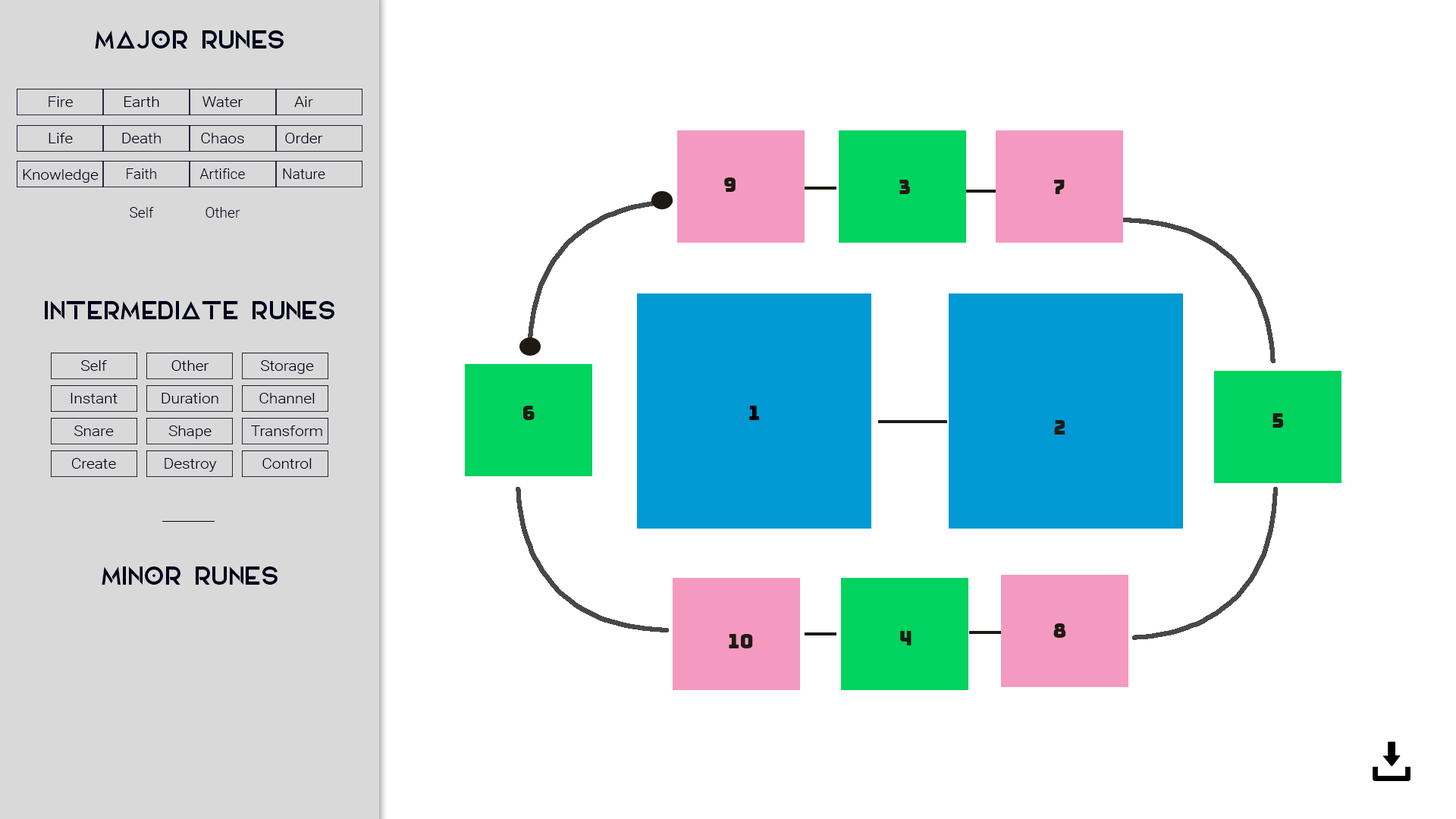
<style>
.page{position:relative;width:1456px;height:819px;background:#ffffff}
.page>*{position:absolute;margin:0}
.t1{font:25.3px "Elianto-Regular";color:#01001b}
.t2{font:14.5px "Roboto-Light";color:#01001b;scale:1.08 1}
.t3{font:14.5px "Roboto-Light";color:#01001b}
.t4{font:19px "Bungee-Regular";color:#1e1a13}
.t5{font:19px "Bungee-Regular";color:#000000}
</style>
<div class="page">
<p class="t1" style="left:95px;top:30px;width:189px;height:19px">MAJOR RUNES</p>
<p class="t2" style="left:49px;top:96px;width:24px;height:11px">Fire</p>
<p class="t2" style="left:124px;top:96px;width:35px;height:11px">Earth</p>
<p class="t2" style="left:202px;top:96px;width:41px;height:11px">Water</p>
<p class="t2" style="left:294px;top:96px;width:19px;height:11px">Air</p>
<p class="t2" style="left:49px;top:133px;width:24px;height:10px">Life</p>
<p class="t2" style="left:122px;top:133px;width:39px;height:10px">Death</p>
<p class="t2" style="left:201px;top:133px;width:43px;height:10px">Chaos</p>
<p class="t2" style="left:285px;top:133px;width:38px;height:10px">Order</p>
<p class="t2" style="left:23px;top:169px;width:76px;height:14px">Knowledge</p>
<p class="t3" style="left:127px;top:168px;width:29px;height:11px">Faith</p>
<p class="t3" style="left:199px;top:168px;width:46px;height:11px">Artifice</p>
<p class="t3" style="left:283px;top:168px;width:42px;height:11px">Nature</p>
<p class="t4" style="left:724px;top:177px;width:12px;height:15px">9</p>
<p class="t4" style="left:899px;top:180px;width:11px;height:14px">3</p>
<p class="t4" style="left:1054px;top:180px;width:11px;height:14px">7</p>
<p class="t3" style="left:130px;top:207px;width:24px;height:11px">Self</p>
<p class="t3" style="left:206px;top:207px;width:34px;height:11px">Other</p>
<p class="t1" style="left:45px;top:301px;width:289px;height:18px">INTERMEDIATE RUNES</p>
<p class="t2" style="left:81px;top:360px;width:26px;height:11px">Self</p>
<p class="t2" style="left:171px;top:360px;width:38px;height:11px">Other</p>
<p class="t2" style="left:261px;top:360px;width:53px;height:14px">Storage</p>
<p class="t2" style="left:71px;top:393px;width:47px;height:10px">Instant</p>
<p class="t2" style="left:162px;top:393px;width:56px;height:10px">Duration</p>
<p class="t2" style="left:259px;top:393px;width:56px;height:10px">Channel</p>
<p class="t4" style="left:523px;top:406px;width:12px;height:14px">6</p>
<p class="t5" style="left:749px;top:406px;width:10px;height:14px">1</p>
<p class="t4" style="left:1272px;top:413px;width:12px;height:15px">5</p>
<p class="t2" style="left:74px;top:425px;width:40px;height:11px">Snare</p>
<p class="t2" style="left:168px;top:425px;width:44px;height:14px">Shape</p>
<p class="t2" style="left:251px;top:425px;width:71px;height:11px">Transform</p>
<p class="t4" style="left:1054px;top:420px;width:11px;height:15px">2</p>
<p class="t2" style="left:72px;top:458px;width:44px;height:11px">Create</p>
<p class="t2" style="left:165px;top:458px;width:52px;height:14px">Destroy</p>
<p class="t2" style="left:262px;top:458px;width:50px;height:11px">Control</p>
<p class="t1" style="left:102px;top:566px;width:176px;height:19px">MINOR RUNES</p>
<p class="t4" style="left:1053px;top:623px;width:13px;height:15px">8</p>
<p class="t4" style="left:729px;top:634px;width:24px;height:14px">10</p>
<p class="t4" style="left:900px;top:631px;width:12px;height:14px">4</p>
</div>
